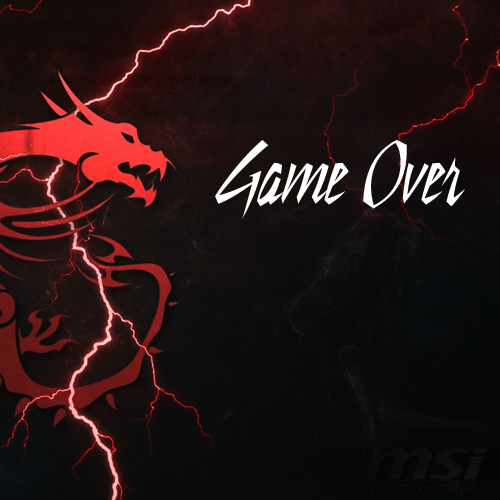
<style>
.page{position:relative;width:500px;height:500px}
.page>*{position:absolute;margin:0}
.t1{font:81.7px "StillTime-Regular";color:#ffffff}
</style>
<div class="page">
<p class="t1" style="left:215px;top:140px;width:250px;height:79px">Game Over</p>
</div>
